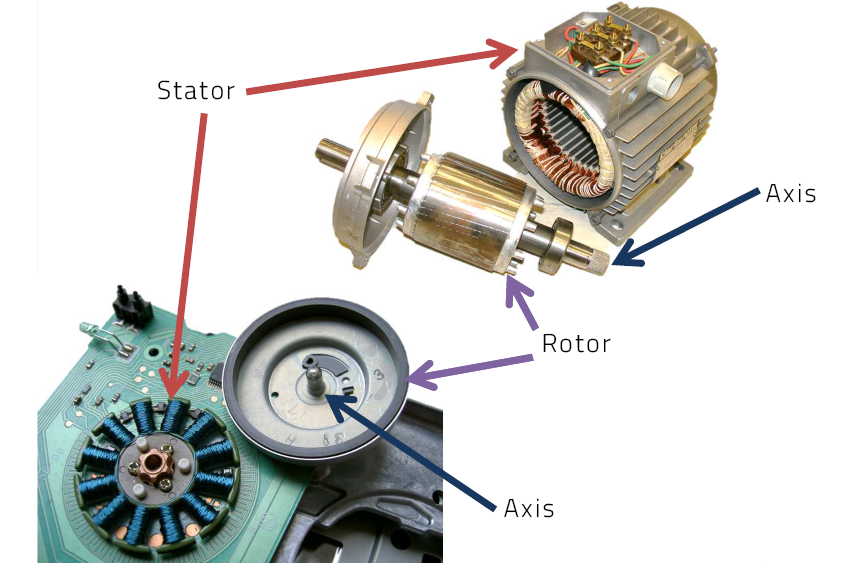
<style>
.page{position:relative;width:846px;height:568px;background:#ffffff}
.page>*{position:absolute;margin:0}
.t1{font:26px "TitilliumWeb-Light";letter-spacing:0.08em;color:#000000}
</style>
<div class="page">
<p class="t1" style="left:158px;top:80px;width:77px;height:20px">Stator</p>
<p class="t1" style="left:766px;top:183px;width:50px;height:20px">Axis</p>
<p class="t1" style="left:543px;top:333px;width:68px;height:20px">Rotor</p>
<p class="t1" style="left:504px;top:498px;width:50px;height:20px">Axis</p>
</div>
